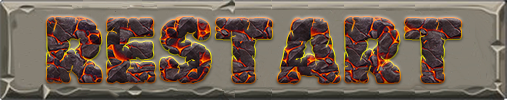
<style>
.page{position:relative;width:507px;height:100px}
.page>*{position:absolute;margin:0}
.t1{font:80px "JFRockSolid"}
</style>
<div class="page">
<p class="t1" style="left:46px;top:17px;width:416px;height:67px">Restart</p>
</div>
